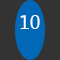
<style>
.page{position:relative;width:60px;height:60px;background:#333333}
.page>*{position:absolute;margin:0}
.t1{font:18px "MicrosoftYaHei";color:#ffffff}
</style>
<div class="page">
<p class="t1" style="left:20px;top:15px;width:20px;height:14px">10</p>
</div>
